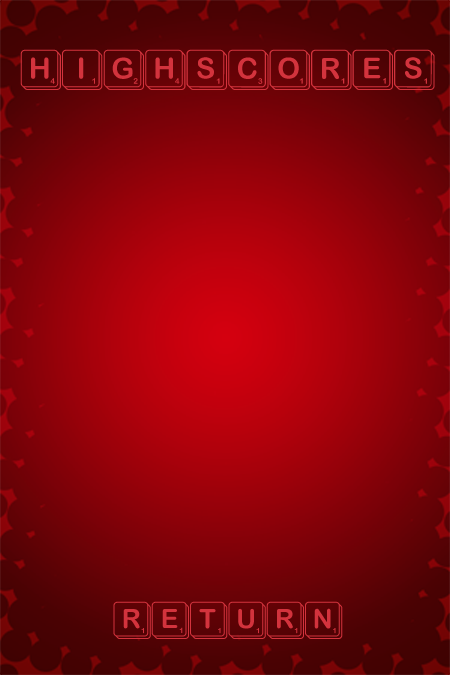
<style>
.page{position:relative;width:450px;height:675px}
.page>*{position:absolute;margin:0}
.t1{font:78px "ScrambleMixed";letter-spacing:-0.025em;color:#d3333d}
.t2{font:72px "ScrambleMixed";letter-spacing:-0.025em;color:#d3333d}
</style>
<div class="page">
<p class="t1" style="left:20px;top:49px;width:415px;height:41px">highscores</p>
<p class="t2" style="left:113px;top:601px;width:230px;height:38px">return</p>
</div>
